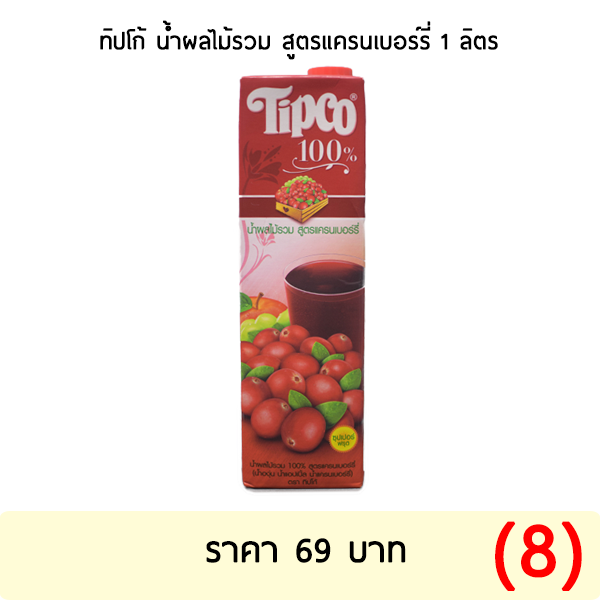
<style>
.page{position:relative;width:600px;height:600px;background:#ffffff}
.page>*{position:absolute;margin:0}
.t1{font:30px "ThaiSansLite";color:#000000;font-weight:bold}
.t2{font:100px "ThaiSansLite";color:#ff0000;font-weight:bold}
.t3{font:45.1px "ThaiSansLite";color:#000000;font-weight:bold}
</style>
<div class="page">
<p class="t1" style="left:100px;top:20px;width:398px;height:40px">ทิปโก้ น้ำผลไม้รวม สูตรแครนเบอร์รี่ 1 ลิตร</p>
<p class="t2" style="left:495px;top:521px;width:87px;height:70px">(8)</p>
<p class="t3" style="left:206px;top:538px;width:200px;height:25px">ราคา 69 บาท</p>
</div>
